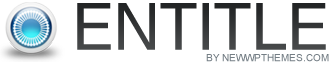
<style>
.page{position:relative;width:333px;height:63px;background:#ffffff}
.page>*{position:absolute;margin:0}
.t1{font:65px "HebarU";color:#323435;text-transform:uppercase}
.t2{font:10px "ArialMT";color:#747e85;text-transform:uppercase}
</style>
<div class="page">
<p class="t1" style="left:77px;top:3px;width:249px;height:47px">Entitle</p>
<p class="t2" style="left:206px;top:54px;width:123px;height:8px">by NewWpThemes.com</p>
</div>
